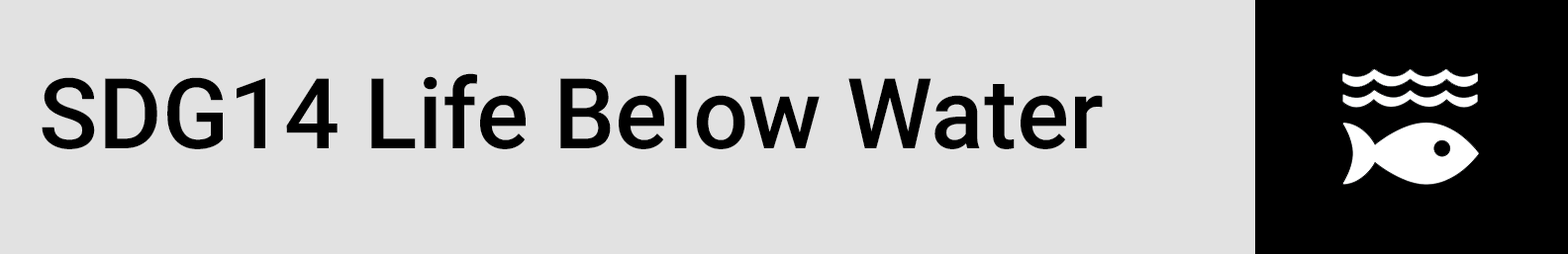
<style>
.page{position:relative;width:1568px;height:254px;background:#e2e2e2}
.page>*{position:absolute;margin:0}
.t1{font:98px "Roboto-Medium";color:#000000}
</style>
<div class="page">
<p class="t1" style="left:42px;top:73px;width:1061px;height:76px">SDG14 Life Below Water</p>
</div>
